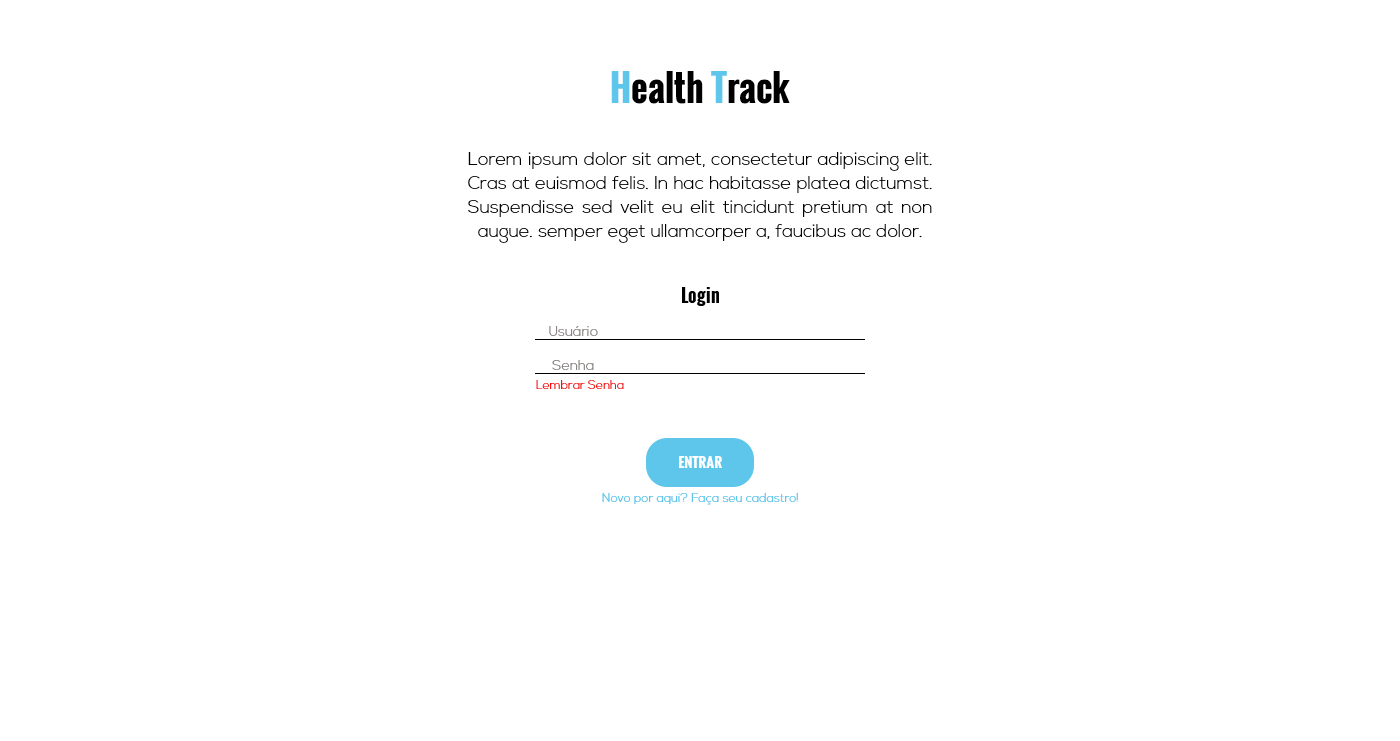
<style>
.page{position:relative;width:1400px;height:741px;background:#ffffff}
.page>*{position:absolute;margin:0}
.t1{font:36px "Oswald-Bold";color:#000000}
.t2{font:36px "Oswald-Bold";color:#5dc6ea}
.t3{font:18px/24px "NexaLight";color:#000000}
.t4{font:18px "Oswald-Bold";color:#000000}
.t5{font:14px "NexaLight";color:#8c8585}
.t6{font:12px "NexaLight";color:#f40e0e}
.t7{font:14px "Oswald-Bold";color:#ffffff}
.t8{font:12px "NexaLight";color:#5dc6ea}
</style>
<div class="page">
<p class="t1" style="left:611px;top:71px;width:179px;height:33px"><span class="t2">H</span>ealth <span class="t2">T</span>rack</p>
<p class="t3" style="left:468px;top:152px;width:464px;height:91px;text-align:justify">Lorem ipsum dolor sit amet, consectetur adipiscing elit. Cras at euismod felis. In hac habitasse platea dictumst. Suspendisse sed velit eu elit tincidunt pretium at non augue. semper eget ullamcorper a, faucibus ac dolor.</p>
<p class="t4" style="left:682px;top:287px;width:37px;height:19px">Login</p>
<p class="t5" style="left:549px;top:326px;width:49px;height:10px">Usuário</p>
<p class="t5" style="left:552px;top:360px;width:42px;height:10px">Senha</p>
<p class="t6" style="left:536px;top:380px;width:88px;height:9px">Lembrar Senha</p>
<p class="t7" style="left:679px;top:456px;width:43px;height:12px">ENTRAR</p>
<p class="t8" style="left:602px;top:493px;width:196px;height:12px">Novo por aqui? Faça seu cadastro!</p>
</div>
